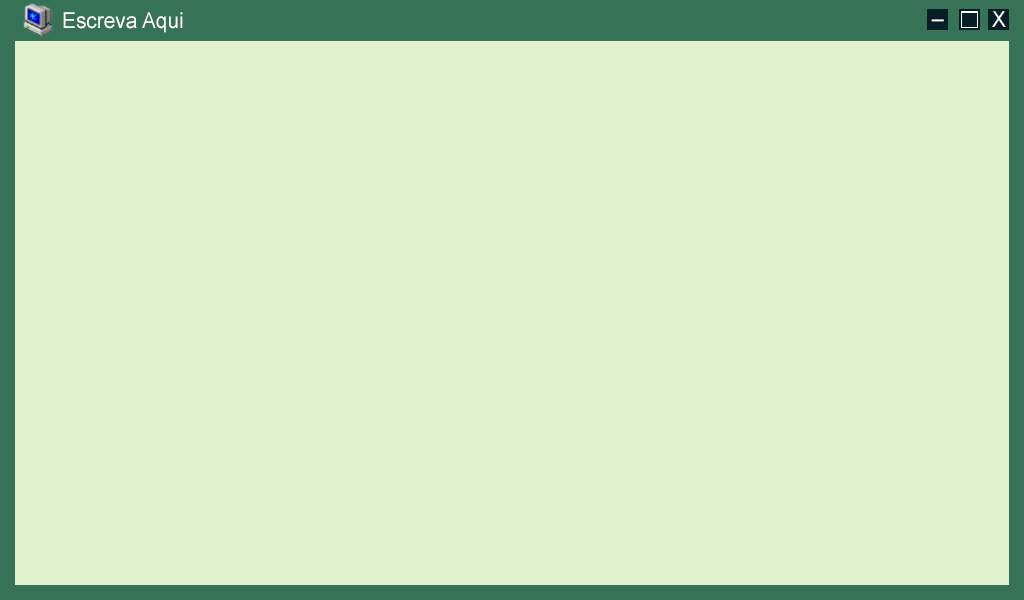
<style>
.page{position:relative;width:1024px;height:600px;background:#e0f2ce}
.page>*{position:absolute;margin:0}
.t1{font:21.9px "ArialMT";color:#ffffff;scale:0.95 1}
</style>
<div class="page">
<p class="t1" style="left:63px;top:12px;width:120px;height:21px">Escreva Aqui</p>
<p class="t1" style="left:992px;top:11px;width:14px;height:16px">X</p>
<p class="t1" style="left:931px;top:19px;width:13px;height:3px">__</p>
</div>
